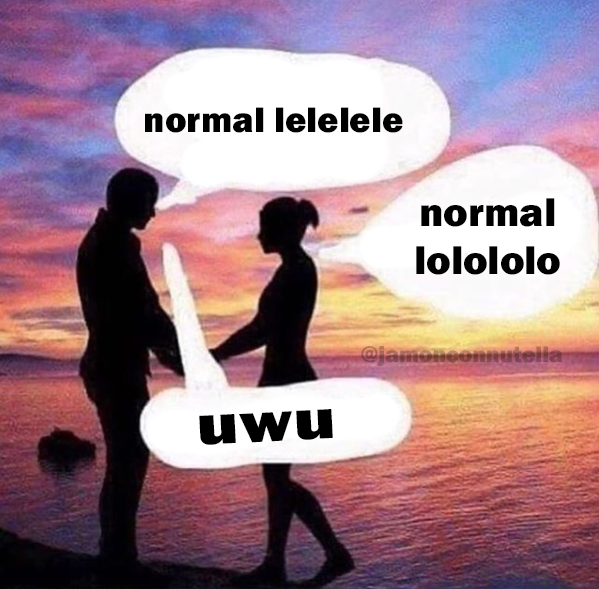
<style>
.page{position:relative;width:599px;height:589px}
.page>*{position:absolute;margin:0}
.t1{font:36.8px "FranklinGothic-Heavy";color:#000000}
.t2{font:41.5px "FranklinGothic-Heavy";color:#000000}
.t3{font:23.2px "FranklinGothic-Heavy"}
.t4{font:58.3px "FranklinGothic-Heavy";color:#000000;scale:1.25 1}
</style>
<div class="page">
<p class="t1" style="left:145px;top:107px;width:258px;height:26px">normal lelelele</p>
<p class="t2" style="left:416px;top:198px;width:144px;height:77px;text-align:center">normal<br>lolololo</p>
<p class="t3" style="left:361px;top:346px;width:201px;height:20px">@jamonconnutella</p>
<p class="t4" style="left:199px;top:409px;width:134px;height:36px;rotate:-3deg">uwu</p>
</div>
